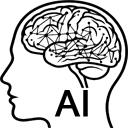
<style>
.page{position:relative;width:128px;height:128px;background:#ffffff}
.page>*{position:absolute;margin:0}
.t1{font:36px "MicrosoftSansSerif";color:#000000;font-weight:bold}
</style>
<div class="page">
<p class="t1" style="left:54px;top:90px;width:34px;height:27px">AI</p>
</div>
